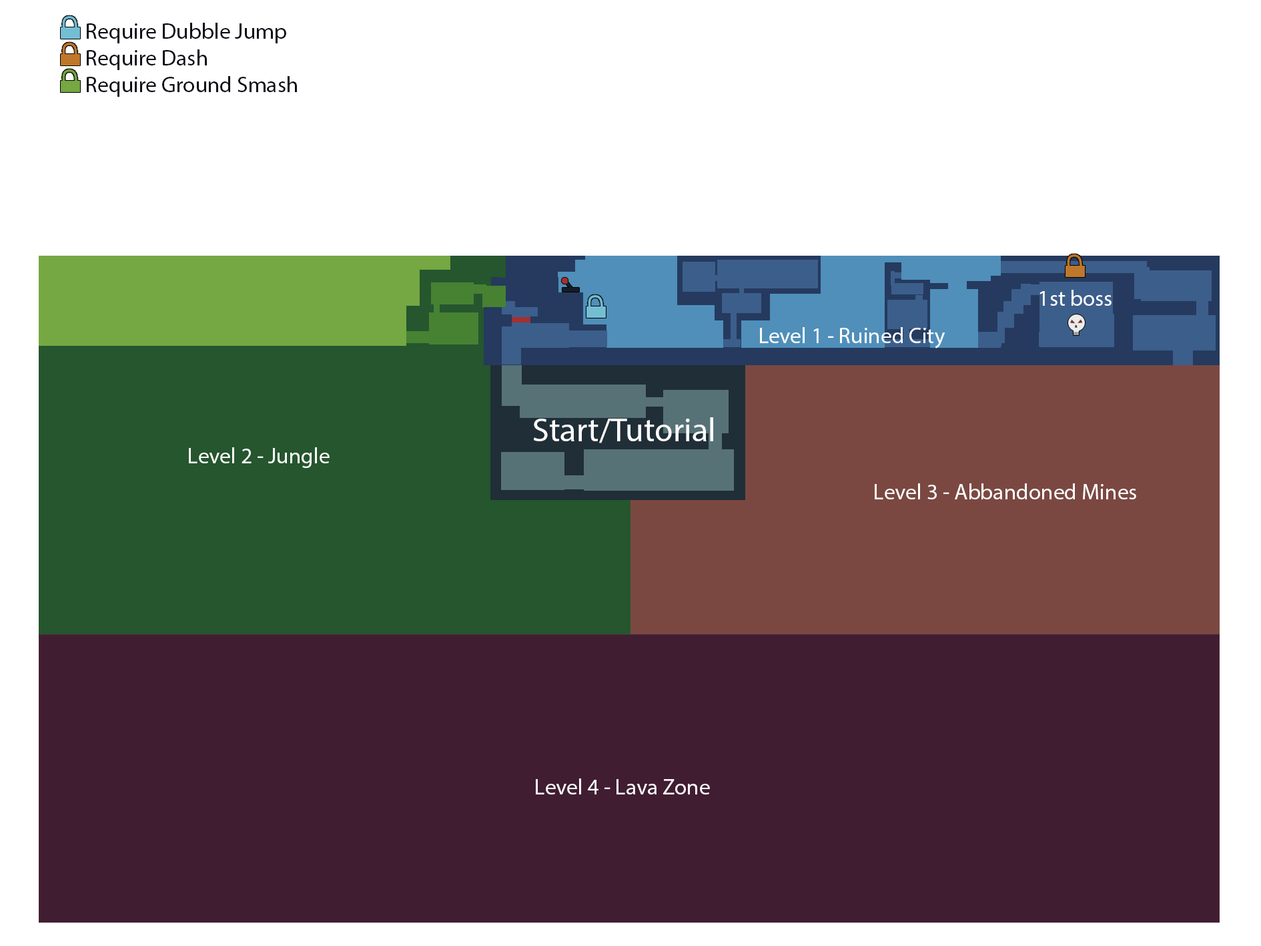
<style>
.page{position:relative;width:1261px;height:946px;background:#ffffff}
.page>*{position:absolute;margin:0}
.t1{font:22.2px "MyriadPro-Regular";color:#090a14}
.t2{font:22.2px "MyriadPro-Regular";color:#ffffff}
.t3{font:33.4px "MyriadPro-Regular";color:#ffffff}
</style>
<div class="page">
<p class="t1" style="left:87px;top:23px;width:210px;height:74px">Require Dubble Jump<br>Require Dash<br>Require Ground Smash</p>
<p class="t2" style="left:1040px;top:290px;width:72px;height:16px">1st boss</p>
<p class="t2" style="left:760px;top:327px;width:186px;height:21px">Level 1 - Ruined City</p>
<p class="t3" style="left:533px;top:417px;width:180px;height:26px">Start/Tutorial</p>
<p class="t2" style="left:189px;top:447px;width:141px;height:21px">Level 2 - Jungle</p>
<p class="t2" style="left:875px;top:483px;width:261px;height:16px">Level 3 - Abbandoned Mines</p>
<p class="t2" style="left:536px;top:778px;width:174px;height:16px">Level 4 - Lava Zone</p>
</div>
